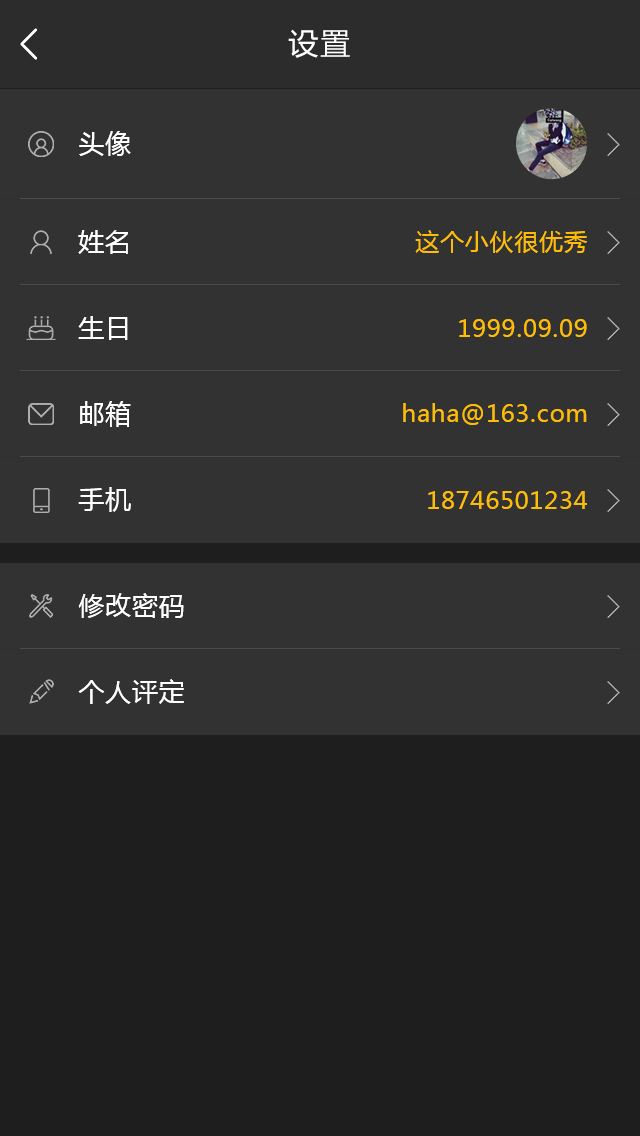
<style>
.page{position:relative;width:640px;height:1136px;background:#323232}
.page>*{position:absolute;margin:0}
.t1{font:30px "MicrosoftYaHei";letter-spacing:0.07em;color:#ffffff}
.t2{font:26px "MicrosoftYaHei";letter-spacing:0.03em;color:#ffffff}
.t3{font:24px "MicrosoftYaHei";letter-spacing:0.03em;color:#fdbd06}
</style>
<div class="page">
<p class="t1" style="left:288px;top:29px;width:62px;height:29px">设置</p>
<p class="t2" style="left:79px;top:131px;width:52px;height:25px">头像</p>
<p class="t2" style="left:78px;top:230px;width:50px;height:24px">姓名</p>
<p class="t3" style="left:415px;top:230px;width:173px;height:24px">这个小伙很优秀</p>
<p class="t2" style="left:78px;top:316px;width:50px;height:24px">生日</p>
<p class="t3" style="left:459px;top:319px;width:128px;height:18px">1999.09.09</p>
<p class="t2" style="left:80px;top:401px;width:51px;height:26px">邮箱</p>
<p class="t3" style="left:403px;top:403px;width:184px;height:22px">haha@163.com</p>
<p class="t2" style="left:78px;top:487px;width:53px;height:25px">手机</p>
<p class="t3" style="left:428px;top:491px;width:159px;height:18px">18746501234</p>
<p class="t2" style="left:78px;top:593px;width:106px;height:25px">修改密码</p>
<p class="t2" style="left:78px;top:679px;width:106px;height:25px">个人评定</p>
</div>
